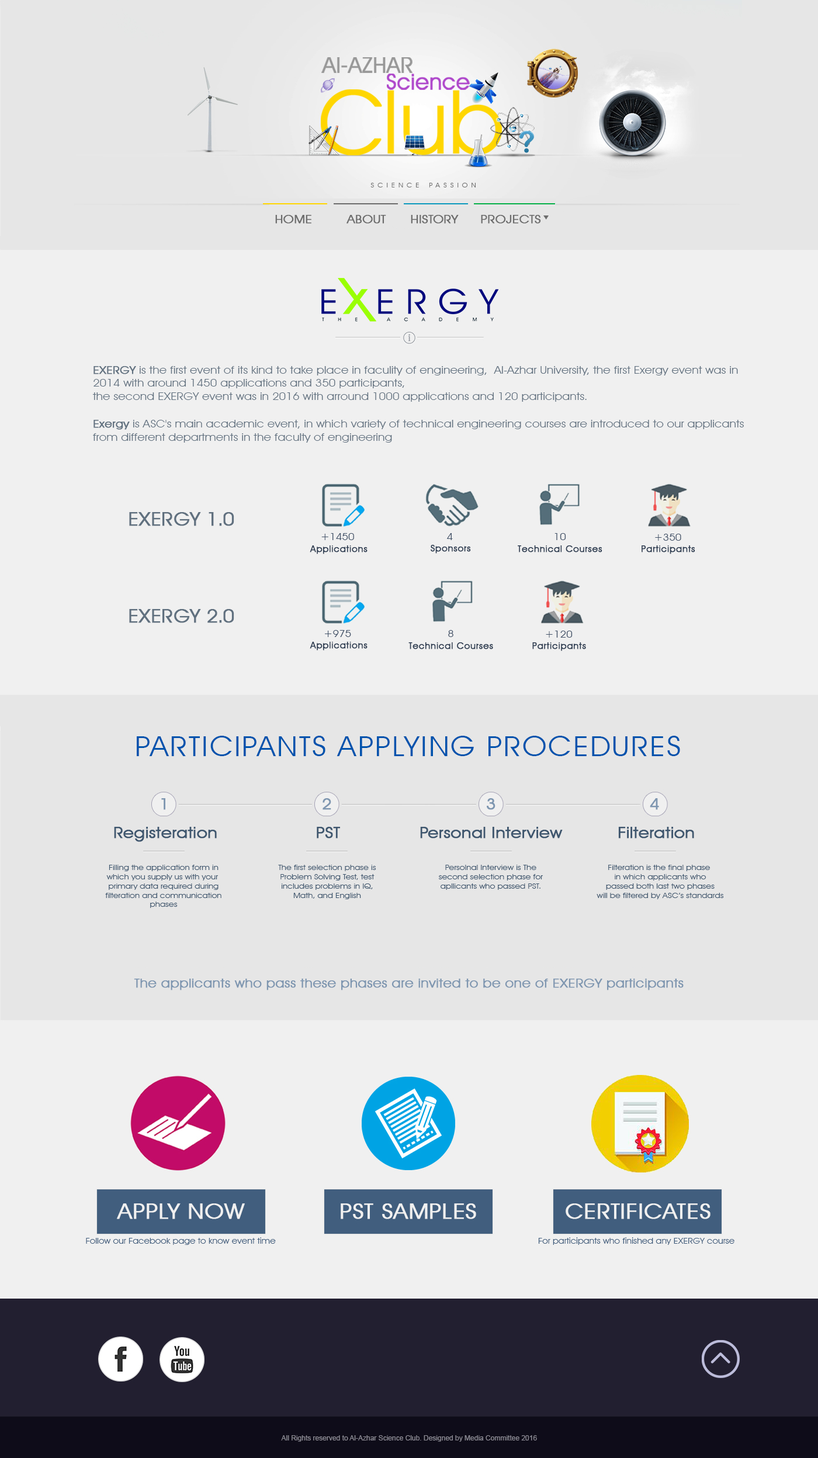
<style>
.page{position:relative;width:818px;height:1458px;background:#f0f0f0}
.page>*{position:absolute;margin:0}
.t1{font:11.9px "AvantGardeITCbyBT-Book";color:#6c6c6c;font-weight:bold;scale:1.11 1}
.t2{font:10.9px "AvantGardeITCbyBT-Book";color:#60707f;scale:1.1 1}
.t3{font:10.9px "AvantGardeITCbyBT-Book";color:#60707f;font-weight:bold;scale:1.1 1}
.t4{font:18.5px "AvantGardeITCbyBT-Book";color:#60707f;font-weight:bold;scale:1.1 1}
.t5{font:18.5px "AvantGardeITCbyBT-Book";letter-spacing:-0.05em;color:#60707f;font-weight:bold;scale:1.1 1}
.t6{font:10px "AvantGardeITCbyBT-Book";color:#44546a;font-variant:small-caps;scale:1.1 1}
.t7{font:9px "AvantGuardRegularSWFTE";letter-spacing:0.05em;color:#2e3d52;font-weight:bold}
.t8{font:28px "AvantGardeITCbyBT-Book";letter-spacing:0.05em;color:#0053ad;font-variant:small-caps;scale:1.1 1}
.t9{font:15.6px "AvantGardeITCbyBT-Book";color:#7e96b0;font-weight:bold;scale:1.1 1}
.t10{font:15.6px "AvantGardeITCbyBT-Book";color:#3e566e;font-weight:bold;scale:1.1 1}
.t11{font:7.8px "AvantGardeITCbyBT-Book";color:#3e566e;scale:1.1 1}
.t12{font:12.7px "AvantGardeITCbyBT-Book";color:#7e96b0;font-weight:bold;scale:1.1 1}
.t13{font:21.6px "AvantGardeITCbyBT-Book";letter-spacing:0.01em;color:#f0f0f0;font-weight:bold;scale:1.1 1}
.t14{font:8.3px "AvantGardeITCbyBT-Book";color:#415e7e;scale:1.1 1}
</style>
<div class="page">
<p class="t1" style="left:275px;top:215px;width:36px;height:9px">HOME</p>
<p class="t1" style="left:346px;top:215px;width:40px;height:9px">ABOUT</p>
<p class="t1" style="left:411px;top:215px;width:47px;height:9px">HISTORY</p>
<p class="t1" style="left:481px;top:215px;width:60px;height:9px">PROJECTS</p>
<p class="t2" style="left:92px;top:366px;width:646px;height:36px"><span class="t3">EXERGY</span> is the first event of its kind to take place in faculity of engineering,  Al-Azhar University, the first Exergy event was in<br>2014 with around 1450 applications and 350 participants,<br>the second EXERGY event was in 2016 with arround 1000 applications and 120 participants.</p>
<p class="t2" style="left:93px;top:420px;width:650px;height:23px"><span class="t3">Exergy</span> is ASC's main academic event, in which variety of technical engineering courses are introduced to our applicants<br>from different departments in the faculty of engineering</p>
<p class="t4" style="left:129px;top:512px;width:105px;height:14px">EXERGY <span class="t5">1.0</span></p>
<p class="t6" style="left:321px;top:533px;width:33px;height:7px">+1450</p>
<p class="t6" style="left:447px;top:533px;width:6px;height:7px">4</p>
<p class="t6" style="left:554px;top:533px;width:12px;height:7px">10</p>
<p class="t6" style="left:655px;top:534px;width:26px;height:7px">+350</p>
<p class="t7" style="left:310px;top:545px;width:57px;height:9px">Applications</p>
<p class="t7" style="left:430px;top:545px;width:41px;height:9px">Sponsors</p>
<p class="t7" style="left:517px;top:545px;width:85px;height:8px">Technical Courses</p>
<p class="t7" style="left:641px;top:545px;width:54px;height:9px">Participants</p>
<p class="t4" style="left:129px;top:609px;width:105px;height:14px">EXERGY <span class="t5">2.0</span></p>
<p class="t7" style="left:310px;top:642px;width:57px;height:9px">Applications</p>
<p class="t6" style="left:325px;top:630px;width:26px;height:7px">+975</p>
<p class="t6" style="left:448px;top:630px;width:5px;height:7px">8</p>
<p class="t6" style="left:545px;top:631px;width:27px;height:7px">+120</p>
<p class="t7" style="left:408px;top:642px;width:85px;height:7px">Technical Courses</p>
<p class="t7" style="left:532px;top:642px;width:54px;height:9px">Participants</p>
<p class="t8" style="left:137px;top:736px;width:543px;height:20px">PARTICIPANTS APPLYING PROCEDURES</p>
<p class="t9" style="left:161px;top:798px;width:4px;height:12px">1</p>
<p class="t9" style="left:322px;top:798px;width:9px;height:12px">2</p>
<p class="t9" style="left:487px;top:798px;width:8px;height:12px">3</p>
<p class="t9" style="left:649px;top:798px;width:10px;height:12px">4</p>
<p class="t10" style="left:114px;top:827px;width:103px;height:15px">Registeration</p>
<p class="t10" style="left:317px;top:827px;width:23px;height:12px">PST</p>
<p class="t10" style="left:420px;top:827px;width:142px;height:12px">Personal Interview</p>
<p class="t10" style="left:618px;top:827px;width:76px;height:12px">Filteration</p>
<p class="t11" style="left:105px;top:865px;width:116px;height:43px;text-align:center">Filling the application form in<br>which you supply us with your <br>primary data required during<br>filteration and communication<br>phases</p>
<p class="t11" style="left:278px;top:865px;width:98px;height:34px;text-align:center">The first selection phase is<br>Problem Solving Test, test<br>includes problems in IQ,<br>Math, and English</p>
<p class="t11" style="left:439px;top:865px;width:104px;height:25px;text-align:center">Persolnal Interview is The<br>second selection phase for<br>apllicants who passed PST.</p>
<p class="t11" style="left:596px;top:865px;width:128px;height:34px;text-align:center">Filteration is the final phase <br>in which applicants who<br>passed both last two phases<br>will be filtered by ASC’s standards</p>
<p class="t12" style="left:134px;top:979px;width:549px;height:12px">The applicants who pass these phases are invited to be one of EXERGY participants</p>
<p class="t13" style="left:117px;top:1204px;width:128px;height:15px">APPLY NOW</p>
<p class="t13" style="left:340px;top:1204px;width:136px;height:15px">PST SAMPLES</p>
<p class="t13" style="left:565px;top:1204px;width:145px;height:15px">CERTIFICATES</p>
<p class="t14" style="left:86px;top:1238px;width:190px;height:7px">Follow our Facebook page to know event time</p>
<p class="t14" style="left:538px;top:1238px;width:196px;height:7px">For participants who finished any EXERGY course</p>
</div>
